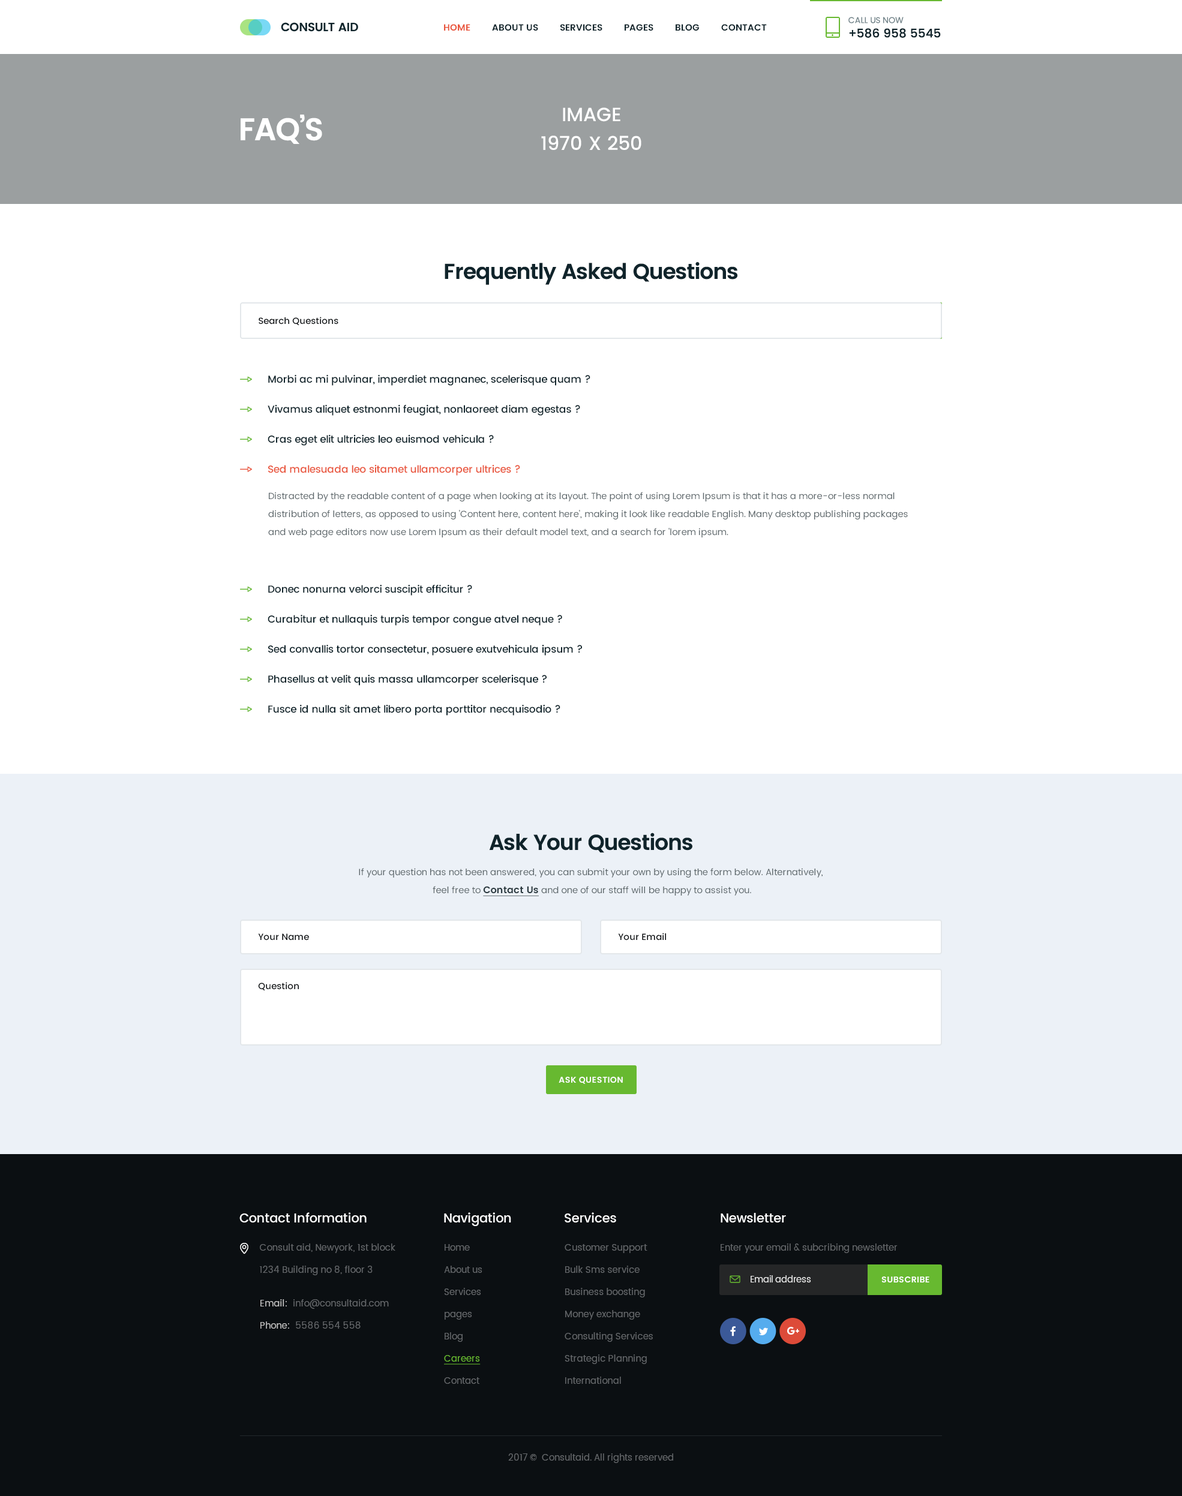
<style>
.page{position:relative;width:1182px;height:1496px;background:#ffffff}
.page>*{position:absolute;margin:0}
.t1{font:12px "Poppins-Medium";letter-spacing:-0.005em;color:#10242b;text-transform:uppercase}
.t2{font:8.4px "Poppins-Regular";letter-spacing:-0.005em;color:#718389;text-transform:uppercase}
.t3{font:9px "Poppins-SemiBold";color:#10242b;text-transform:uppercase}
.t4{font:9px "Poppins-SemiBold";color:#e9563d;text-transform:uppercase}
.t5{font:19.2px/28.8px "Poppins-Medium";color:#ffffff;text-transform:uppercase}
.t6{font:31.3px "Poppins-SemiBold";letter-spacing:-0.03em;color:#ffffff}
.t7{font:21.6px "Poppins-SemiBold";letter-spacing:-0.03em;color:#10242b}
.t8{font:9px "Poppins-Medium";color:#0b0f12}
.t9{font:10.2px/30px "Poppins-Medium";letter-spacing:-0.01em;color:#10242b}
.t10{font:10.2px/30px "Poppins-Medium";letter-spacing:-0.01em;color:#e9563d}
.t11{font:9px/18px "Poppins-Regular";letter-spacing:0.01em;color:#5c666a}
.t12{font:9.6px/18px "Poppins-SemiBold";letter-spacing:0.01em;color:#2b3a40;text-decoration:underline}
.t13{font:8.4px "Poppins-SemiBold";letter-spacing:0.025em;color:#ffffff;text-transform:uppercase}
.t14{font:12.6px "Poppins-Medium";letter-spacing:-0.01em;color:#ffffff}
.t15{font:9px/22.2px "Poppins-Regular";letter-spacing:0.01em;color:#64676a}
.t16{font:9px/22.2px "Poppins-Regular";color:#64676a}
.t17{font:9px/22.2px "Poppins-Regular";color:#67b930;text-decoration:underline}
.t18{font:9px "Poppins-Regular";color:#64676a}
.t19{font:8.7px "Poppins-Regular";color:#ececec}
.t20{font:9px/22.2px "Poppins-Regular";letter-spacing:0.01em;color:#c5c5c5}
.t21{font:9px/22.2px "Poppins-Regular";letter-spacing:0.01em;color:#c4c4c4}
</style>
<div class="page">
<p class="t1" style="left:848px;top:17px;width:93px;height:21px"><span class="t2">Call us now<br></span>+586 958 5545</p>
<p class="t3" style="left:444px;top:24px;width:323px;height:7px"><span class="t4">Home</span>         about us         services         Pages         blog         contact</p>
<p class="t5" style="left:541px;top:107px;width:100px;height:43px;text-align:center">Image<br>1970 x 250</p>
<p class="t6" style="left:241px;top:115px;width:81px;height:29px">FAQ’S</p>
<p class="t7" style="left:445px;top:262px;width:292px;height:23px">Frequently Asked Questions</p>
<p class="t8" style="left:259px;top:317px;width:79px;height:8px">Search Questions</p>
<p class="t9" style="left:268px;top:375px;width:322px;height:341px">Morbi ac mi pulvinar, imperdiet magnanec, scelerisque quam ?<br>Vivamus aliquet estnonmi feugiat, nonlaoreet diam egestas ?<br>Cras eget elit ultricies leo euismod vehicula ?<br><span class="t10">Sed malesuada leo sitamet ullamcorper ultrices ?<br><br><br><br></span>Donec nonurna velorci suscipit efficitur ?<br>Curabitur et nullaquis turpis tempor congue atvel neque ?<br>Sed convallis tortor consectetur, posuere exutvehicula ipsum ?<br>Phasellus at velit quis massa ullamcorper scelerisque ?<br>Fusce id nulla sit amet libero porta porttitor necquisodio ?</p>
<p class="t11" style="left:268px;top:492px;width:640px;height:46px">Distracted by the readable content of a page when looking at its layout. The point of using Lorem Ipsum is that it has a more-or-less normal distribution of letters, as opposed to using 'Content here, content here', making it look like readable English. Many desktop publishing packages and web page editors now use Lorem Ipsum as their default model text, and a search for 'lorem ipsum.</p>
<p class="t7" style="left:489px;top:833px;width:203px;height:20px">Ask Your Questions</p>
<p class="t11" style="left:359px;top:868px;width:464px;height:28px;text-align:center">If your question has not been answered, you can submit your own by using the form below. Alternatively, <br>feel free to <span class="t12">Contact Us</span> and one of our staff will be happy to assist you.</p>
<p class="t8" style="left:258px;top:934px;width:51px;height:7px">Your Name</p>
<p class="t8" style="left:618px;top:933px;width:48px;height:8px">Your Email</p>
<p class="t8" style="left:258px;top:982px;width:41px;height:9px">Question</p>
<p class="t13" style="left:559px;top:1077px;width:64px;height:7px">Ask question</p>
<p class="t14" style="left:239px;top:1213px;width:128px;height:10px">Contact Information</p>
<p class="t14" style="left:444px;top:1213px;width:67px;height:13px">Navigation</p>
<p class="t14" style="left:565px;top:1213px;width:51px;height:10px">Services</p>
<p class="t14" style="left:721px;top:1213px;width:65px;height:10px">Newsletter</p>
<p class="t15" style="left:260px;top:1244px;width:135px;height:32px">Consult aid, Newyork, 1st block <br>1234 Building no 8, floor 3</p>
<p class="t16" style="left:444px;top:1244px;width:38px;height:140px">Home<br>About us<br>Services<br>pages<br>Blog<br><span class="t17">Careers<br></span>Contact</p>
<p class="t15" style="left:565px;top:1244px;width:88px;height:140px">Customer Support<br>Bulk Sms service<br>Business boosting<br>Money exchange<br>Consulting Services<br>Strategic Planning<br>International</p>
<p class="t18" style="left:721px;top:1244px;width:177px;height:9px">Enter your email &amp; subcribing newsletter</p>
<p class="t19" style="left:751px;top:1276px;width:60px;height:7px">Email address</p>
<p class="t13" style="left:881px;top:1277px;width:48px;height:6px">Subscribe</p>
<p class="t15" style="left:260px;top:1300px;width:129px;height:29px"><span class="t20">Email:</span>  info@consultaid.com<br><span class="t21">Phone:</span>  5586 554 558</p>
<p class="t18" style="left:508px;top:1454px;width:165px;height:9px">2017 ©  Consultaid. All rights reserved</p>
</div>
